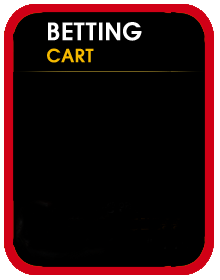
<style>
.page{position:relative;width:220px;height:280px;background:#000000}
.page>*{position:absolute;margin:0}
.t1{font:24px "A082¿ï¸ªµµM";letter-spacing:-0.01em;color:#ffffff;font-weight:bold}
.t2{font:18px "A082¿ï¸ªµµM";letter-spacing:-0.01em;color:#f4b900;font-weight:bold}
</style>
<div class="page">
<p class="t1" style="left:47px;top:22px;width:95px;height:41px">BETTING<br><span class="t2">CART</span></p>
</div>
